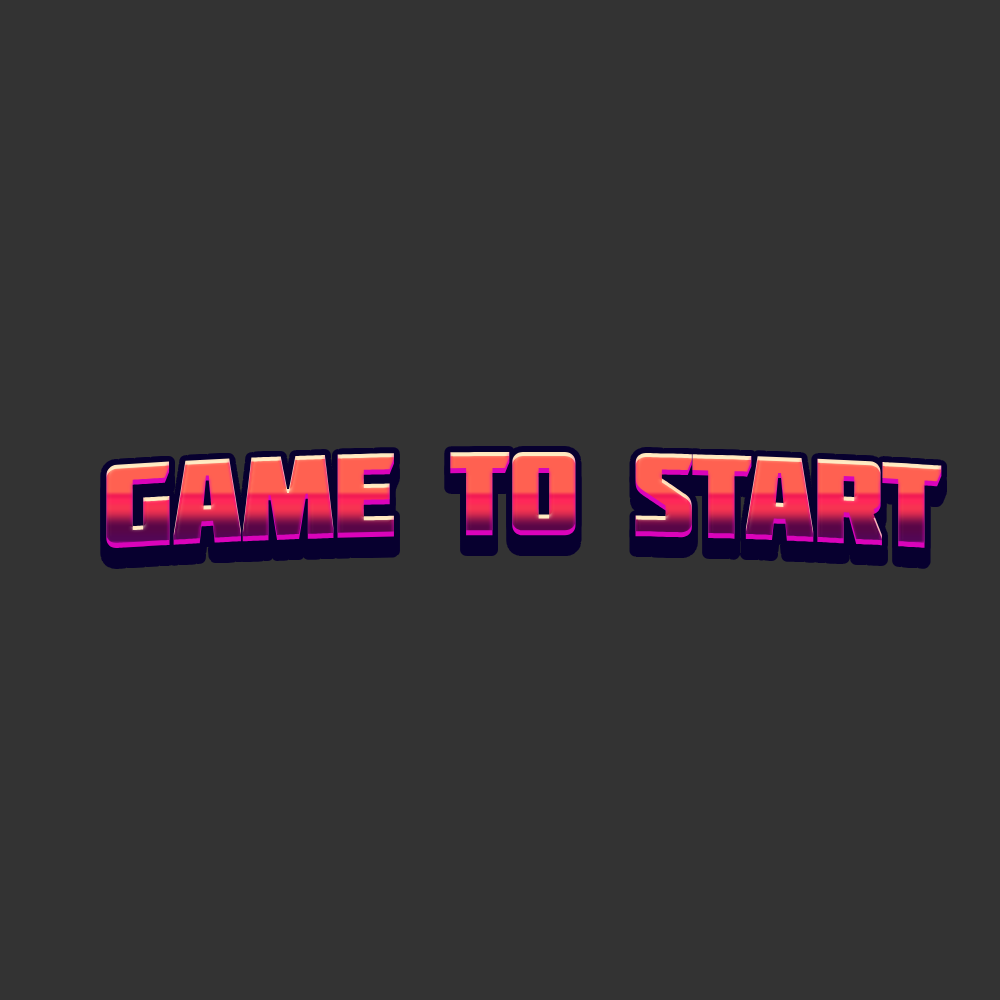
<style>
.page{position:relative;width:1000px;height:1000px;background:#333333}
.page>*{position:absolute;margin:0}
.t1{font:119px "Molot";letter-spacing:-0.025em}
</style>
<div class="page">
<p class="t1" style="left:106px;top:451px;width:836px;height:98px">Game TO START</p>
</div>
